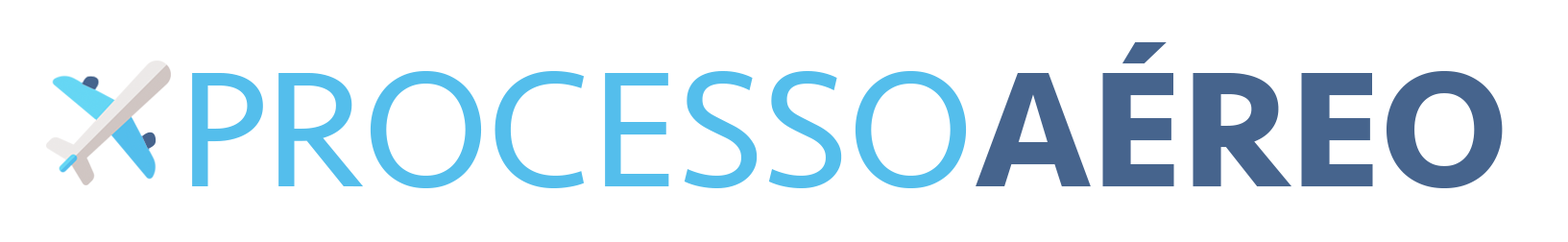
<style>
.page{position:relative;width:1568px;height:242px;background:#ffffff}
.page>*{position:absolute;margin:0}
.t1{font:169.8px "Seravek";color:#53beec}
.t2{font:169.8px "Seravek-Bold";color:#46648d}
</style>
<div class="page">
<p class="t1" style="left:192px;top:42px;width:1311px;height:146px">PROCESSO<span class="t2">AÉREO</span></p>
</div>
